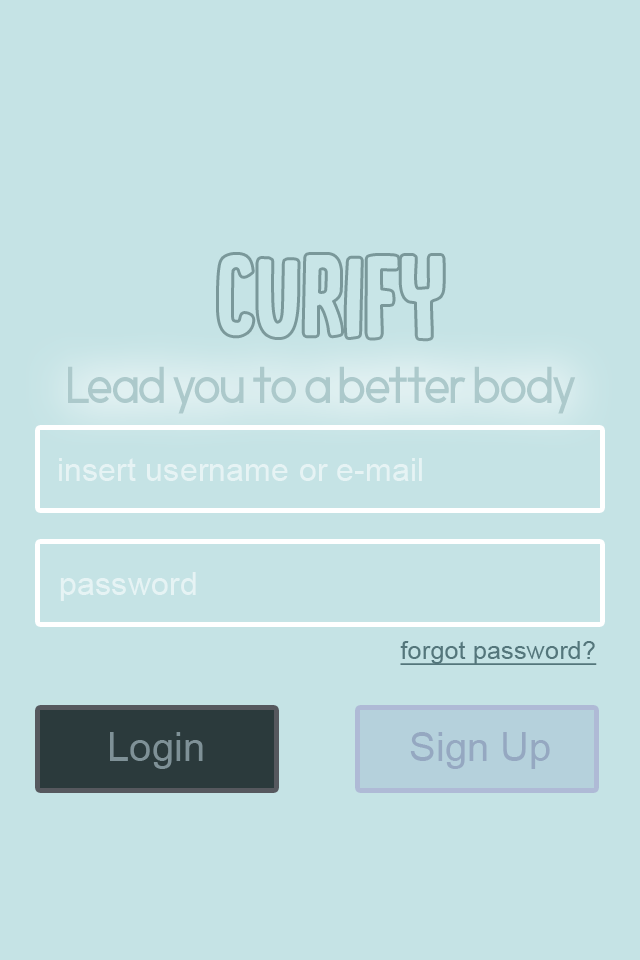
<style>
.page{position:relative;width:640px;height:960px;background:#c5e3e5}
.page>*{position:absolute;margin:0}
.t1{font:120.1px "DKCanoodle-Regular";color:#c8e5e7}
.t2{font:54.9px "Morningtype";color:#acc9cb}
.t3{font:32.4px "ArialMT";color:#e6f3f4}
.t4{font:25.5px "ArialMT";color:#54767b;text-decoration:underline}
.t5{font:40.1px "ArialMT";color:#7f9197}
.t6{font:40.1px "ArialMT";color:#95a8c1}
</style>
<div class="page">
<p class="t1" style="left:219px;top:255px;width:224px;height:84px">Curify</p>
<p class="t2" style="left:68px;top:366px;width:508px;height:48px">Lead you to a better body</p>
<p class="t3" style="left:59px;top:458px;width:363px;height:23px">insert username or e-mail</p>
<p class="t3" style="left:60px;top:572px;width:136px;height:29px">password</p>
<p class="t4" style="left:400px;top:641px;width:197px;height:24px">forgot password?</p>
<p class="t5" style="left:110px;top:732px;width:93px;height:37px">Login</p>
<p class="t6" style="left:410px;top:732px;width:140px;height:37px">Sign Up</p>
</div>
